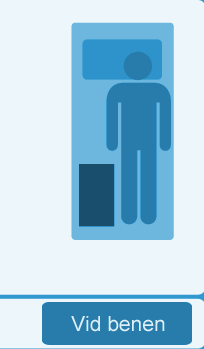
<style>
.page{position:relative;width:204px;height:349px;background:#ecf6fb}
.page>*{position:absolute;margin:0}
.t1{font:21px "ArialMT";color:#dfeff8}
</style>
<div class="page">
<p class="t1" style="left:71px;top:316px;width:94px;height:16px">Vid benen</p>
</div>
